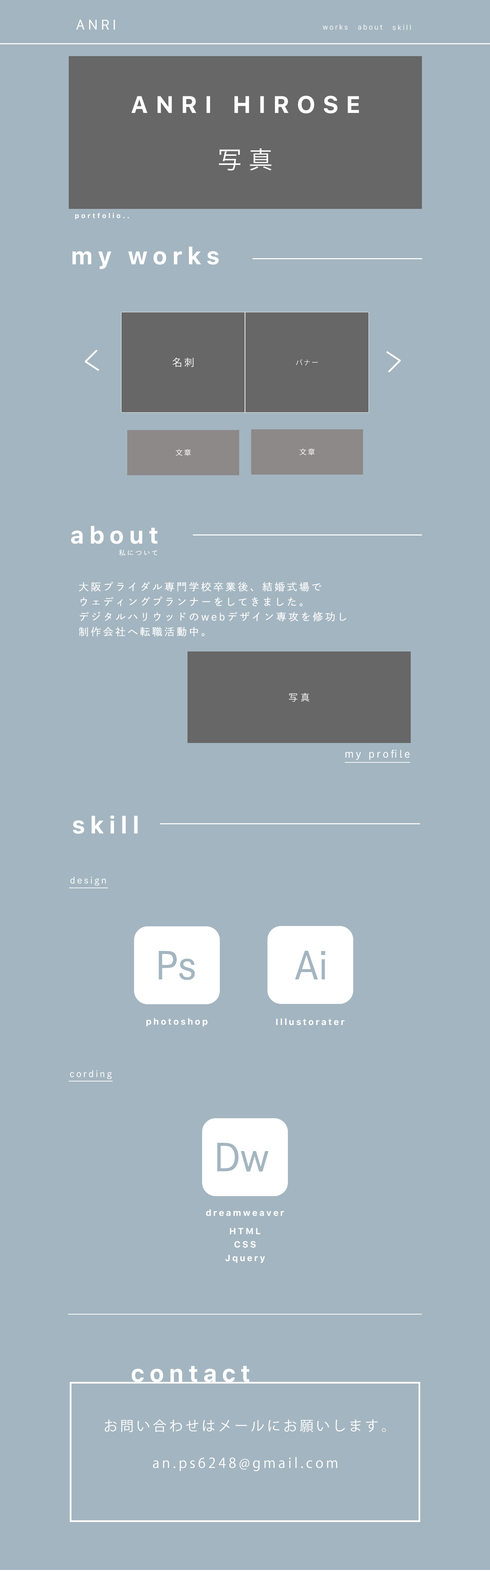
<style>
.page{position:relative;width:490px;height:1571px;background:#a3b5c0}
.page>*{position:absolute;margin:0}
.t1{font:13.6px "Galvji";letter-spacing:0.2em;color:#ffffff}
.t2{font:6.8px "Galvji";letter-spacing:0.2em;color:#ffffff}
.t3{font:23.8px "Galvji-Bold";letter-spacing:0.3em;color:#ffffff}
.t4{font:23.8px "KozGoPr6N-Regular";letter-spacing:0.3em;color:#ffffff}
.t5{font:6.8px "Galvji-Bold";letter-spacing:0.3em;color:#ffffff}
.t6{font:23.8px "Galvji-Bold";letter-spacing:0.2em;color:#ffffff}
.t7{font:9.9px "KozGoPr6N-Regular";letter-spacing:0.2em;color:#ffffff}
.t8{font:6.6px "KozGoPr6N-Regular";letter-spacing:0.2em;color:#ffffff}
.t9{font:7.1px "KozGoPr6N-Regular";letter-spacing:0.2em;color:#ffffff}
.t10{font:6.8px "DNPShueiGoGinStd-M";letter-spacing:0.2em;color:#ffffff}
.t11{font:10.2px/15px "DNPShueiGoGinStd-M";letter-spacing:0.2em;color:#ffffff}
.t12{font:9.2px "KozGoPr6N-Regular";letter-spacing:0.3em;color:#ffffff}
.t13{font:10.2px "DNPShueiGoGinStd-M";letter-spacing:0.2em;color:#ffffff}
.t14{font:8.8px "DNPShueiGoGinStd-M";letter-spacing:0.2em;color:#ffffff}
.t15{font:37.4px "DNPShueiGoGinStd-M";letter-spacing:-0.02em;color:#a3b5c0}
.t16{font:8.8px "Galvji-Bold";letter-spacing:0.2em;color:#ffffff}
.t17{font:13.6px "KozGoPr6N-Regular";letter-spacing:0.2em;color:#ffffff}
</style>
<div class="page">
<p class="t1" style="left:76px;top:20px;width:39px;height:10px">ANRI</p>
<p class="t2" style="left:322px;top:24px;width:26px;height:6px">works</p>
<p class="t2" style="left:358px;top:24px;width:24px;height:6px">about</p>
<p class="t2" style="left:392px;top:24px;width:19px;height:6px">skill</p>
<p class="t3" style="left:131px;top:96px;width:228px;height:18px">ANRI HIROSE</p>
<p class="t4" style="left:219px;top:148px;width:52px;height:22px">写真</p>
<p class="t5" style="left:75px;top:213px;width:54px;height:6px">portfolio..</p>
<p class="t6" style="left:72px;top:247px;width:147px;height:22px">my works</p>
<p class="t7" style="left:172px;top:357px;width:22px;height:10px">名刺</p>
<p class="t8" style="left:296px;top:359px;width:22px;height:6px">バナー</p>
<p class="t9" style="left:175px;top:449px;width:16px;height:7px">文章</p>
<p class="t9" style="left:299px;top:448px;width:16px;height:7px">文章</p>
<p class="t6" style="left:71px;top:526px;width:86px;height:18px">about</p>
<p class="t10" style="left:119px;top:549px;width:38px;height:7px">私について</p>
<p class="t11" style="left:79px;top:581px;width:267px;height:55px">大阪ブライダル専門学校卒業後、結婚式場で<br>ウェディングプランナーをしてきました。<br>デジタルハリウッドのwebデザイン専攻を修功し<br>制作会社へ転職活動中。</p>
<p class="t12" style="left:289px;top:693px;width:20px;height:9px">写真</p>
<p class="t13" style="left:345px;top:749px;width:64px;height:11px">my profile</p>
<p class="t6" style="left:73px;top:815px;width:65px;height:19px">skill</p>
<p class="t14" style="left:70px;top:876px;width:36px;height:9px">design</p>
<p class="t15" style="left:158px;top:951px;width:37px;height:29px">Ps</p>
<p class="t15" style="left:295px;top:950px;width:30px;height:29px">Ai</p>
<p class="t16" style="left:146px;top:1018px;width:61px;height:8px">photoshop</p>
<p class="t16" style="left:276px;top:1018px;width:69px;height:7px">Illustorater</p>
<p class="t14" style="left:70px;top:1070px;width:42px;height:9px">cording</p>
<p class="t15" style="left:217px;top:1142px;width:51px;height:29px">Dw</p>
<p class="t16" style="left:206px;top:1209px;width:78px;height:7px">dreamweaver</p>
<p class="t16" style="left:230px;top:1227px;width:30px;height:7px">HTML</p>
<p class="t16" style="left:234px;top:1241px;width:22px;height:7px">CSS</p>
<p class="t16" style="left:225px;top:1254px;width:40px;height:9px">Jquery</p>
<p class="t6" style="left:132px;top:1366px;width:117px;height:16px">contact</p>
<p class="t17" style="left:105px;top:1419px;width:281px;height:13px">お問い合わせはメールにお願いします。</p>
<p class="t17" style="left:153px;top:1457px;width:184px;height:14px">an.ps6248@gmail.com</p>
</div>
